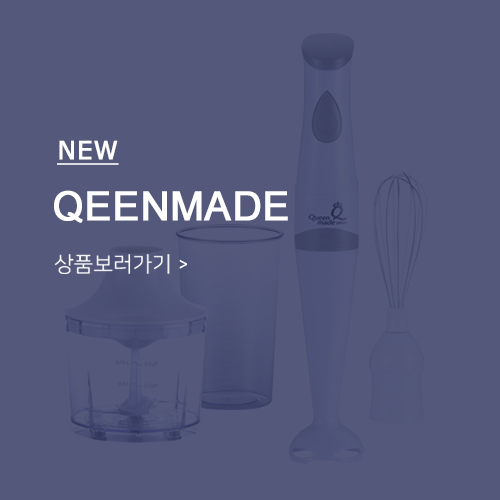
<style>
.page{position:relative;width:500px;height:500px;background:#54597b}
.page>*{position:absolute;margin:0}
.t1{font:25px "Verdana";color:#ffffff;font-weight:bold;text-decoration:underline}
.t2{font:40px "ArialMT";color:#ffffff;text-transform:uppercase;font-weight:bold}
</style>
<div class="page">
<p class="t1" style="left:57px;top:140px;width:62px;height:25px">NEW</p>
<p class="t2" style="left:54px;top:190px;width:234px;height:33px">qeenmade</p>
</div>
